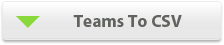
<style>
.page{position:relative;width:224px;height:45px}
.page>*{position:absolute;margin:0}
.t1{font:17.5px "MyriadPro-Bold";color:#61635f}
</style>
<div class="page">
<p class="t1" style="left:73px;top:15px;width:109px;height:12px">Teams To CSV</p>
</div>
